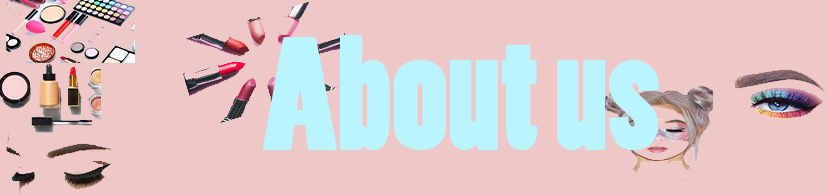
<style>
.page{position:relative;width:828px;height:195px;background:#eec7c7}
.page>*{position:absolute;margin:0}
.t1{font:150px "PoplarStd";color:#baf4ff}
</style>
<div class="page">
<p class="t1" style="left:262px;top:35px;width:397px;height:116px">About us</p>
</div>
